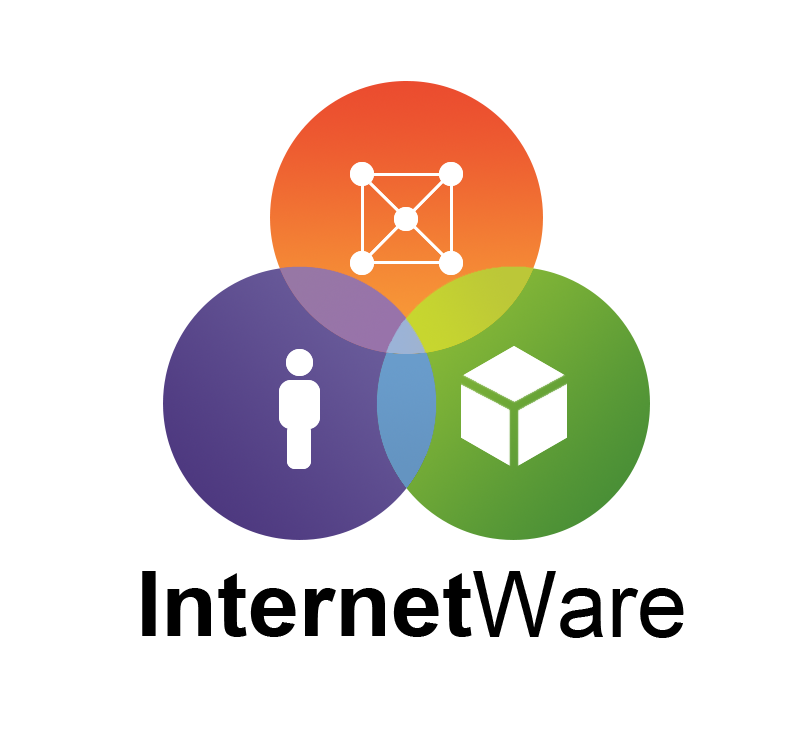
<style>
.page{position:relative;width:800px;height:751px;background:#ffffff}
.page>*{position:absolute;margin:0}
.t1{font:90px "Arial-BoldMT";color:#000000}
.t2{font:92px "ArialMT";color:#000000}
</style>
<div class="page">
<p class="t1" style="left:142px;top:571px;width:330px;height:66px">Internet</p>
<p class="t2" style="left:473px;top:571px;width:211px;height:67px">Ware</p>
</div>
